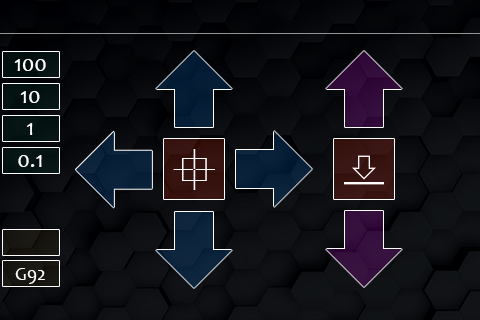
<style>
.page{position:relative;width:480px;height:320px}
.page>*{position:absolute;margin:0}
.t1{font:22.7px "Candara";color:#fefefe}
.t2{font:18.9px "Candara";color:#fefefe}
</style>
<div class="page">
<p class="t1" style="left:14px;top:59px;width:32px;height:12px">100</p>
<p class="t1" style="left:20px;top:91px;width:20px;height:12px">10</p>
<p class="t1" style="left:27px;top:123px;width:6px;height:12px">1</p>
<p class="t1" style="left:18px;top:155px;width:24px;height:12px">0.1</p>
<p class="t2" style="left:15px;top:268px;width:30px;height:16px">G92</p>
</div>
